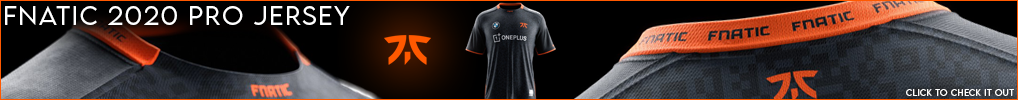
<style>
.page{position:relative;width:1018px;height:100px}
.page>*{position:absolute;margin:0}
.t1{font:23.6px "LEMONMILK-Light";letter-spacing:0.07em;color:#ffffff}
.t2{font:8px "LEMONMILK-Light";letter-spacing:0.07em;color:#ffffff}
</style>
<div class="page">
<p class="t1" style="left:5px;top:6px;width:345px;height:19px">Fnatic 2020 Pro Jersey</p>
<p class="t2" style="left:906px;top:89px;width:108px;height:7px">CLICK TO CHECK IT OUT</p>
</div>
